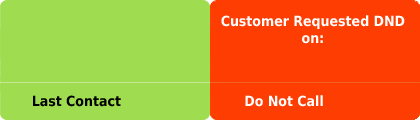
<style>
.page{position:relative;width:420px;height:120px;background:#a0dc4f}
.page>*{position:absolute;margin:0}
.t1{font:14px "DejaVuSansCondensed-Bold";color:#ffffff}
.t2{font:14px "DejaVuSansCondensed-Bold";color:#010101}
</style>
<div class="page">
<p class="t1" style="left:221px;top:15px;width:184px;height:29px;text-align:center">Customer Requested DND <br>on:</p>
<p class="t2" style="left:33px;top:95px;width:88px;height:12px">Last Contact</p>
<p class="t1" style="left:245px;top:95px;width:78px;height:12px">Do Not Call</p>
</div>
